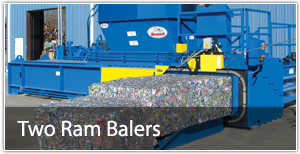
<style>
.page{position:relative;width:300px;height:154px}
.page>*{position:absolute;margin:0}
.t1{font:22px "MyriadPro-Regular";color:#ffffff}
</style>
<div class="page">
<p class="t1" style="left:17px;top:120px;width:143px;height:17px">Two Ram Balers</p>
</div>
